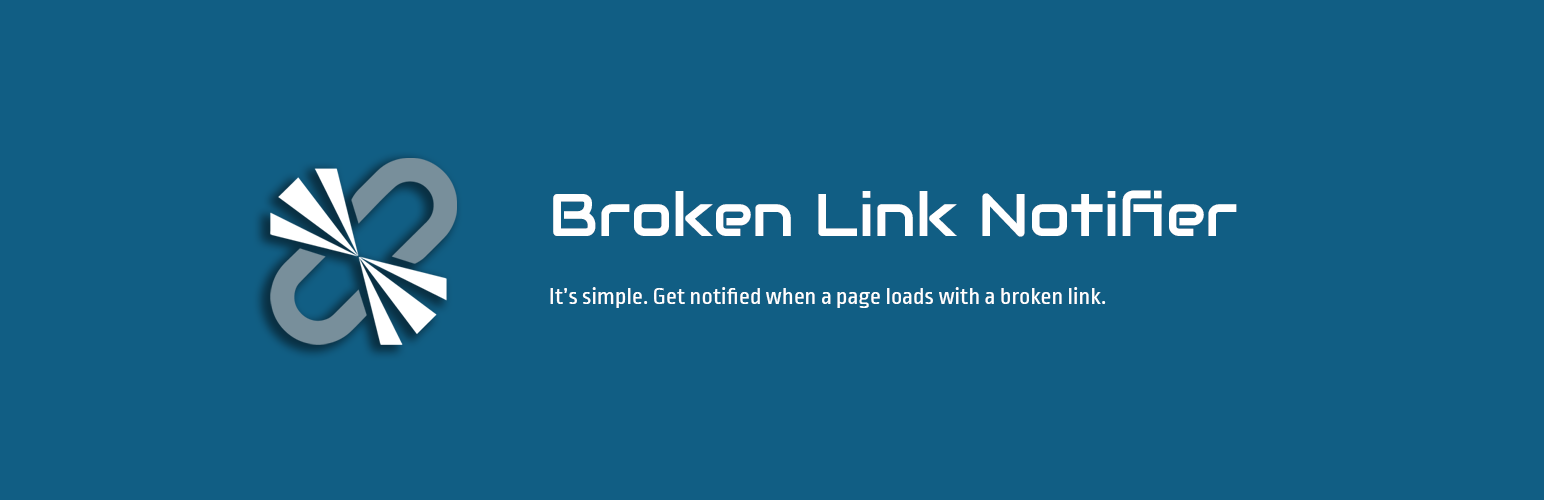
<style>
.page{position:relative;width:1544px;height:500px;background:#115e84}
.page>*{position:absolute;margin:0}
.t1{font:60px "Audiowide-Regular";letter-spacing:0.005em;color:#ffffff}
.t2{font:24px "RopaSans-Regular";letter-spacing:0.005em;color:#ffffff}
</style>
<div class="page">
<p class="t1" style="left:553px;top:190px;width:684px;height:47px">Broken Link Notifier</p>
<p class="t2" style="left:550px;top:287px;width:556px;height:21px">It’s simple. Get notified when a page loads with a broken link.</p>
</div>
